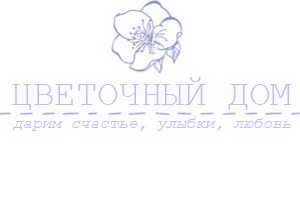
<style>
.page{position:relative;width:300px;height:200px;background:#ffffff}
.page>*{position:absolute;margin:0}
.t1{font:36px "CourierNewPSMT";color:#ccccff}
.t2{font:16px "CourierNewPS-ItalicMT";color:#ccccff}
</style>
<div class="page">
<p class="t1" style="left:12px;top:77px;width:280px;height:33px">ЦВЕТОЧНЫЙ ДОМ</p>
<p class="t2" style="left:13px;top:118px;width:278px;height:13px">дарим счастье, улыбки, любовь</p>
</div>
